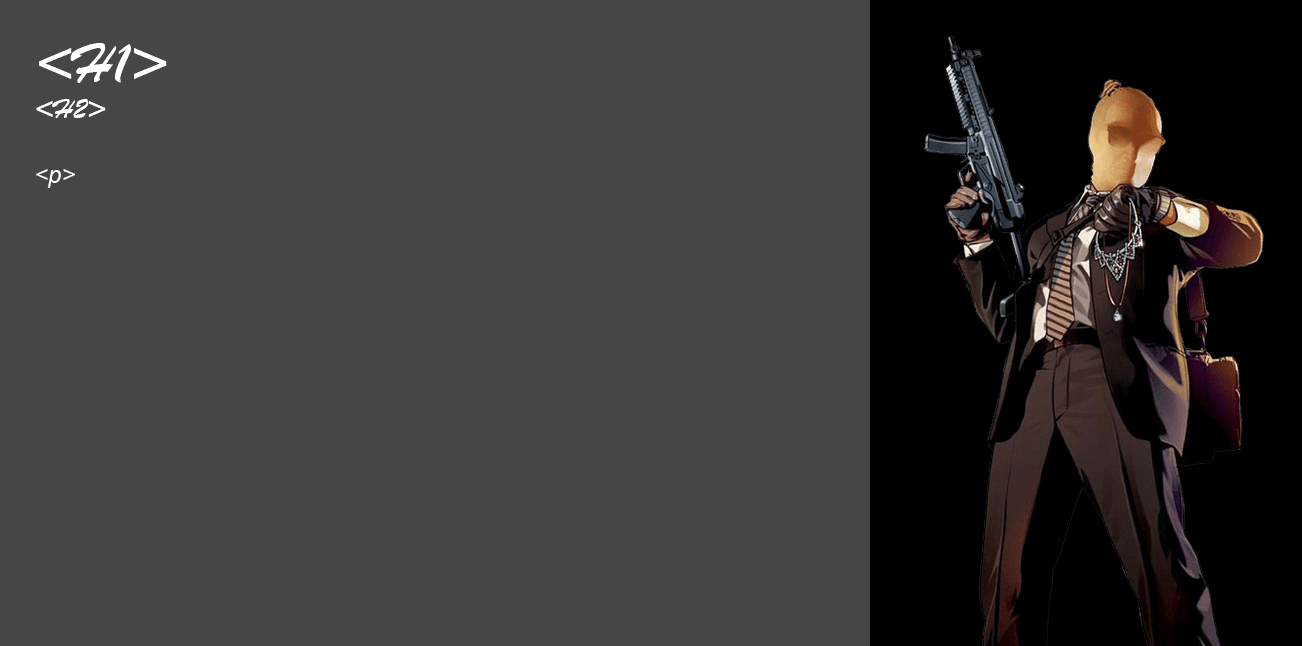
<style>
.page{position:relative;width:1302px;height:646px;background:#464548}
.page>*{position:absolute;margin:0}
.t1{font:60px "BrushScriptMT";color:#ffffff}
.t2{font:30px "BrushScriptMT";color:#ffffff}
.t3{font:24px "Arial-ItalicMT";color:#ffffff}
</style>
<div class="page">
<p class="t1" style="left:36px;top:43px;width:131px;height:145px">&lt;H1&gt;<br><span class="t2">&lt;H2&gt;<br><br></span><span class="t3">&lt;p&gt;</span></p>
</div>
